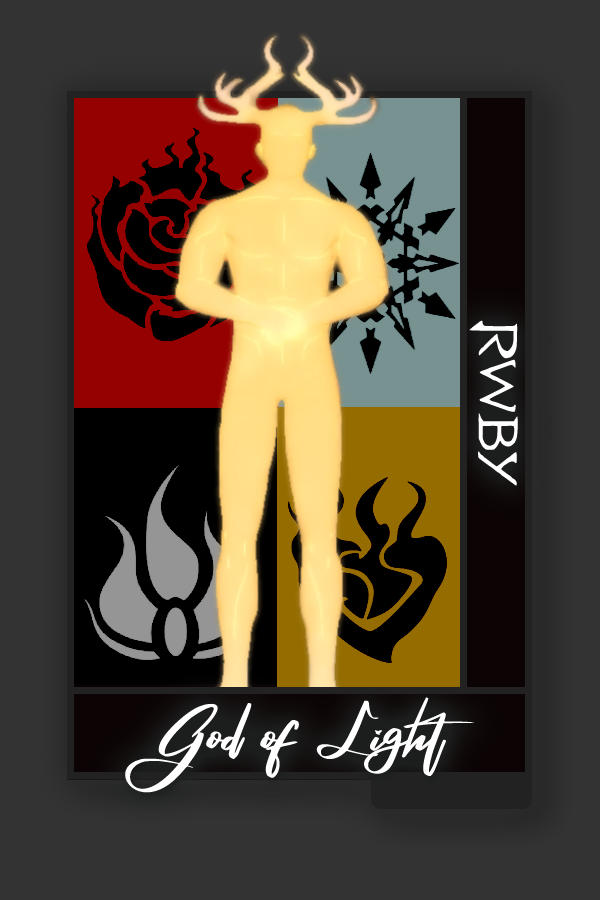
<style>
.page{position:relative;width:600px;height:900px;background:#333333}
.page>*{position:absolute;margin:0}
.t1{font:61.3px "RWBY_Style";color:#ffffff;scale:1.25 1}
.t2{font:75px "RosegaFREE";color:#ffffff}
</style>
<div class="page">
<p class="t1" style="left:469px;top:320px;width:49px;height:166px;rotate:90deg">RWBY</p>
<p class="t2" style="left:106px;top:697px;width:370px;height:116px">God of Light</p>
</div>
